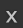
<style>
.page{position:relative;width:23px;height:28px;background:#333333}
.page>*{position:absolute;margin:0}
.t1{font:24px "Outfit-Regular";color:#c3c3c3;font-weight:bold;font-style:italic}
</style>
<div class="page">
<p class="t1" style="left:6px;top:11px;width:12px;height:12px">x</p>
</div>
